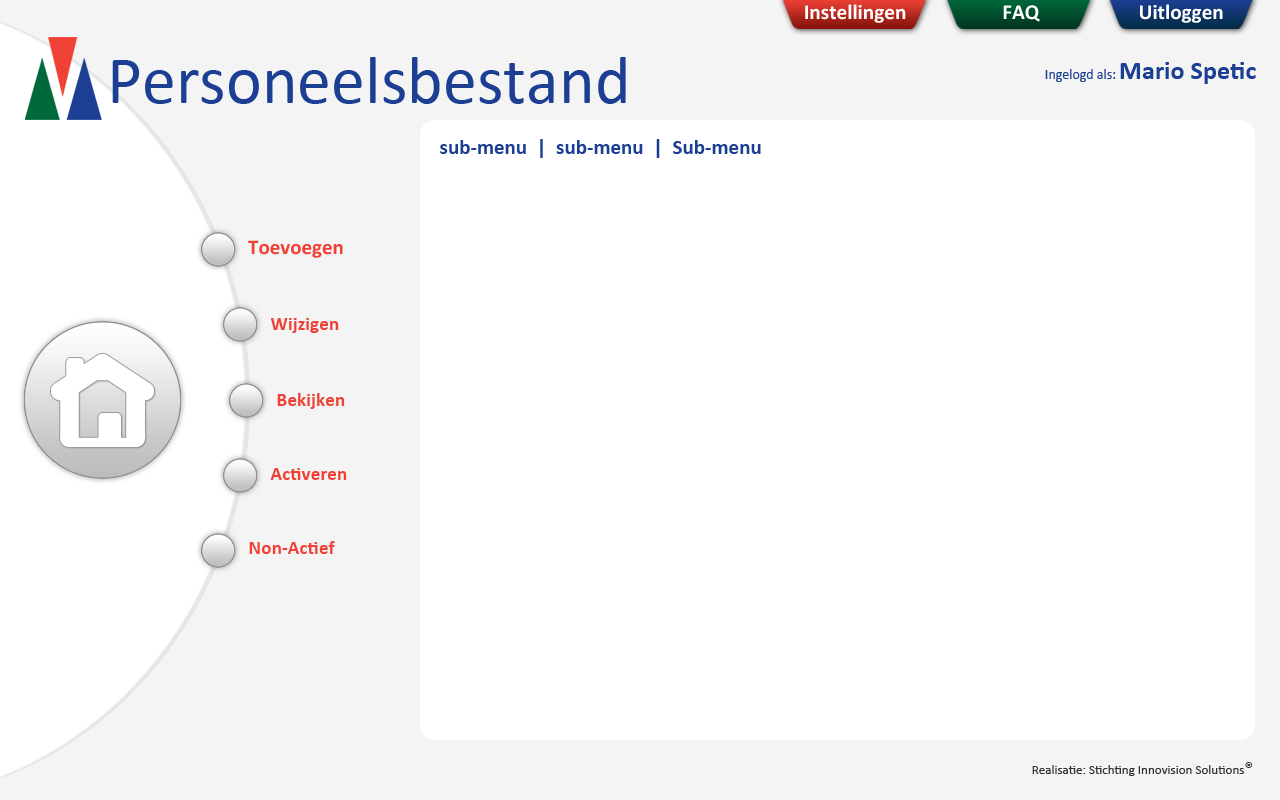
<style>
.page{position:relative;width:1280px;height:800px;background:#ffffff}
.page>*{position:absolute;margin:0}
.t1{font:21.2px "Calibri-Bold";color:#ffffff}
.t2{font:68px "Calibri";color:#1c3f94}
.t3{font:14px "Calibri";color:#1c3f94}
.t4{font:26.2px "Calibri-Bold";color:#1c3f94}
.t5{font:21px "Calibri-Bold";color:#1c3f94}
.t6{font:21px "Calibri-Bold";color:#ef4135}
.t7{font:19.3px "Calibri-Bold";color:#ef4135}
.t8{font:13.1px "Calibri";color:#323232}
.t9{font:17.4px "Calibri";color:#323232}
</style>
<div class="page">
<p class="t1" style="left:1003px;top:5px;width:37px;height:17px">FAQ</p>
<p class="t1" style="left:1140px;top:4px;width:83px;height:19px">Uitloggen</p>
<p class="t2" style="left:112px;top:57px;width:514px;height:47px">Personeelsbestand</p>
<p class="t3" style="left:1045px;top:62px;width:211px;height:22px">Ingelogd als: <span class="t4">Mario Spetic</span></p>
<p class="t5" style="left:440px;top:139px;width:321px;height:19px">sub-menu  |  sub-menu  |  Sub-menu</p>
<p class="t6" style="left:248px;top:240px;width:95px;height:18px">Toevoegen</p>
<p class="t7" style="left:271px;top:318px;width:68px;height:15px">Wijzigen</p>
<p class="t7" style="left:277px;top:393px;width:68px;height:16px">Bekijken</p>
<p class="t7" style="left:270px;top:468px;width:77px;height:12px">Activeren</p>
<p class="t7" style="left:249px;top:541px;width:86px;height:13px">Non-Actief</p>
<p class="t8" style="left:1032px;top:762px;width:221px;height:14px">Realisatie: Stichting Innovision Solutions<span class="t9">®</span></p>
</div>
